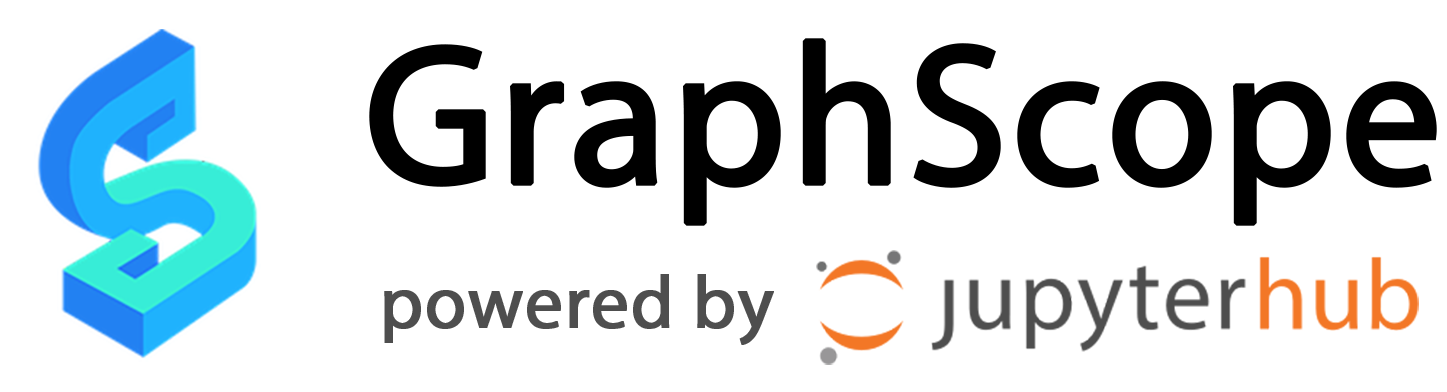
<style>
.page{position:relative;width:1447px;height:392px;background:#ffffff}
.page>*{position:absolute;margin:0}
.t1{font:200px "MyriadPro-Regular";color:#000000;font-weight:bold}
.t2{font:75px "MyriadPro-Regular";color:#4e4e4e;font-weight:bold}
</style>
<div class="page">
<p class="t1" style="left:369px;top:38px;width:1068px;height:188px">GraphScope</p>
<p class="t2" style="left:384px;top:274px;width:390px;height:71px">powered by</p>
</div>
